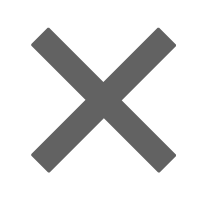
<style>
.page{position:relative;width:200px;height:200px;background:#ffffff}
.page>*{position:absolute;margin:0}
.t1{font:292px "Verdana";letter-spacing:-0.115em;color:#616161;font-weight:bold}
</style>
<div class="page">
<p class="t1" style="left:31px;top:27px;width:145px;height:146px;rotate:45deg">+</p>
</div>
